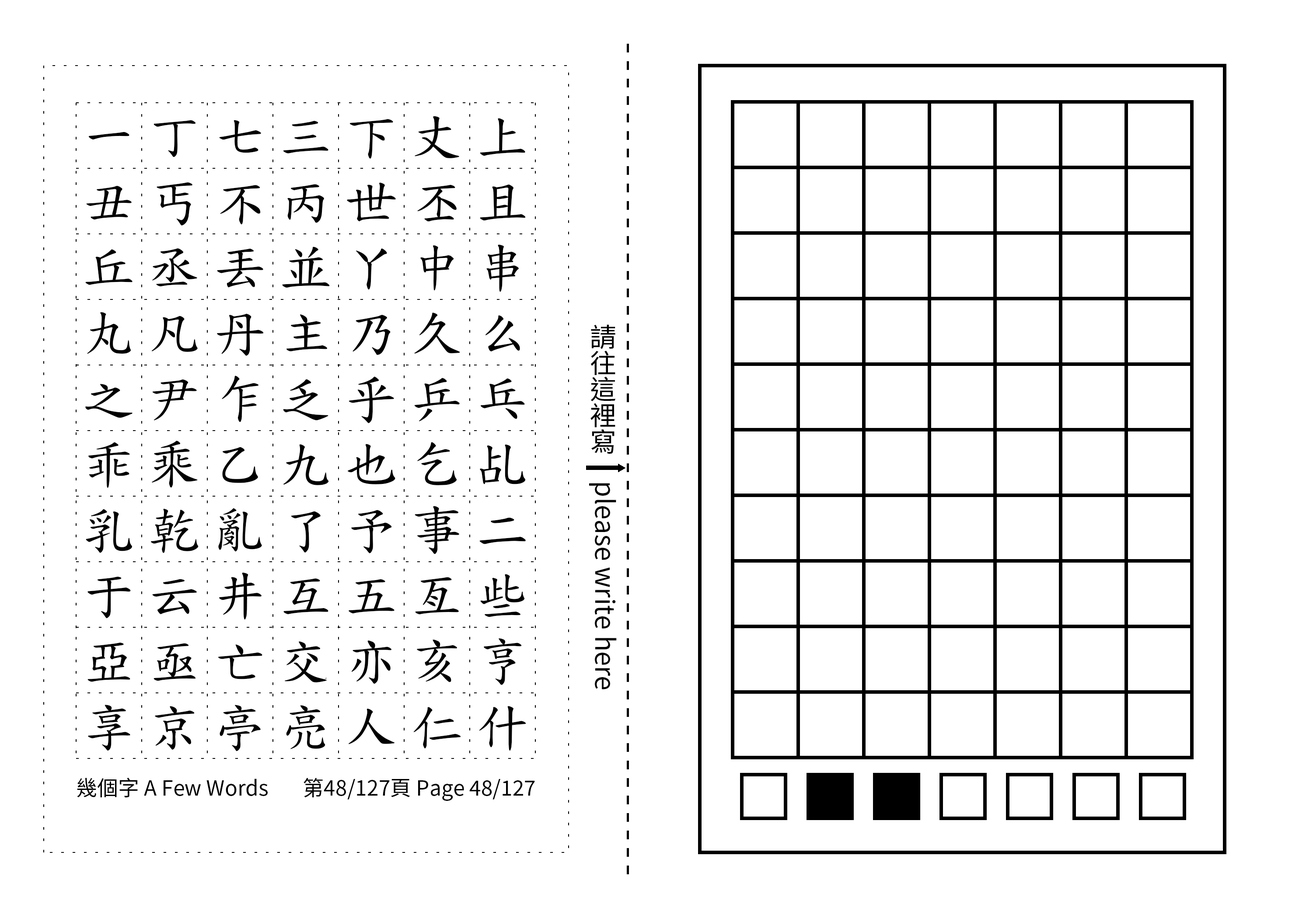
<style>
.page{position:relative;width:1299px;height:918px;background:#ffffff}
.page>*{position:absolute;margin:0}
.t1{font:52.5px/65.6px "TW-Kai-98_1";letter-spacing:0.25em;color:#000000}
.t2{font:26.2px "SourceHanSansTC-Regular";color:#000000}
.t3{font:21px "SourceHanSansTC-Regular";color:#000000}
</style>
<div class="page">
<p class="t1" style="left:85px;top:116px;width:441px;height:636px;text-align:center">一丁七三下丈上丑丐不丙世丕且丘丞丟並丫中串丸凡丹主乃久么之尹乍乏乎乒乓乖乘乙九也乞乩乳乾亂了予事二于云井互五亙些亞亟亡交亦亥亨享京亭亮人仁什</p>
<p class="t2" style="left:589px;top:324px;width:28px;height:366px;text-align:center">請往這裡寫　please write here</p>
<p class="t3" style="left:77px;top:778px;width:191px;height:20px">幾個字 A Few Words</p>
<p class="t3" style="left:303px;top:778px;width:232px;height:23px">第48/127頁 Page 48/127</p>
</div>
